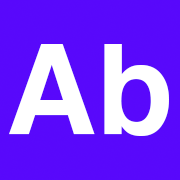
<style>
.page{position:relative;width:180px;height:180px;background:#5808fb}
.page>*{position:absolute;margin:0}
.t1{font:125px "Helvetica-Bold";color:#ffffff}
</style>
<div class="page">
<p class="t1" style="left:9px;top:44px;width:160px;height:92px">Ab</p>
</div>
